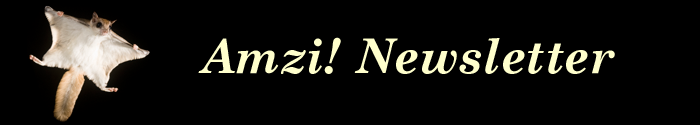
<style>
.page{position:relative;width:700px;height:125px;background:#000000}
.page>*{position:absolute;margin:0}
.t1{font:47.8px "CenturySchoolbook-BoldItalic";color:#ffffcc}
</style>
<div class="page">
<p class="t1" style="left:198px;top:37px;width:417px;height:37px">Amzi! Newsletter</p>
</div>
